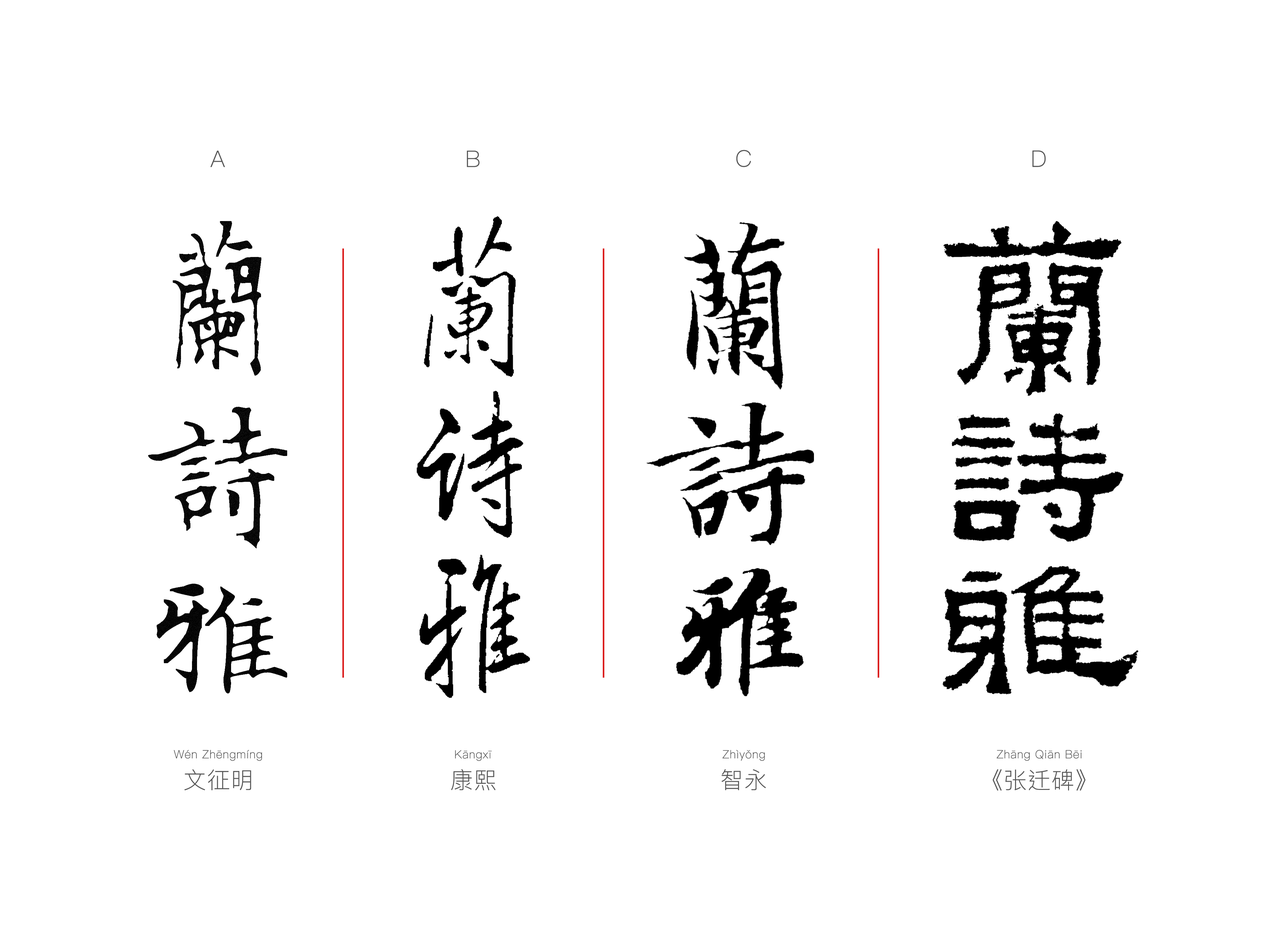
<style>
.page{position:relative;width:1261px;height:946px;background:#ffffff}
.page>*{position:absolute;margin:0}
.t1{font:22.7px "PingFangHK-Thin";letter-spacing:0.02em;color:#565656;font-weight:bold}
.t2{font:11.3px "PingFangHK-Thin";letter-spacing:0.02em;color:#565656;font-weight:bold}
</style>
<div class="page">
<p class="t1" style="left:736px;top:150px;width:15px;height:17px">C</p>
<p class="t1" style="left:210px;top:150px;width:15px;height:17px">A</p>
<p class="t1" style="left:467px;top:150px;width:12px;height:17px">B</p>
<p class="t1" style="left:1032px;top:150px;width:14px;height:17px">D</p>
<p class="t2" style="left:174px;top:750px;width:88px;height:11px">Wén Zhēngmíng</p>
<p class="t2" style="left:455px;top:750px;width:37px;height:11px">Kāngxī</p>
<p class="t2" style="left:723px;top:750px;width:42px;height:11px">Zhìyǒng</p>
<p class="t2" style="left:996px;top:750px;width:86px;height:11px">Zhāng Qiān Bēi</p>
<p class="t1" style="left:184px;top:769px;width:67px;height:21px">文征明</p>
<p class="t1" style="left:451px;top:769px;width:45px;height:21px">康熙</p>
<p class="t1" style="left:722px;top:769px;width:44px;height:21px">智永</p>
<p class="t1" style="left:992px;top:769px;width:94px;height:22px">《张迁碑》</p>
</div>
